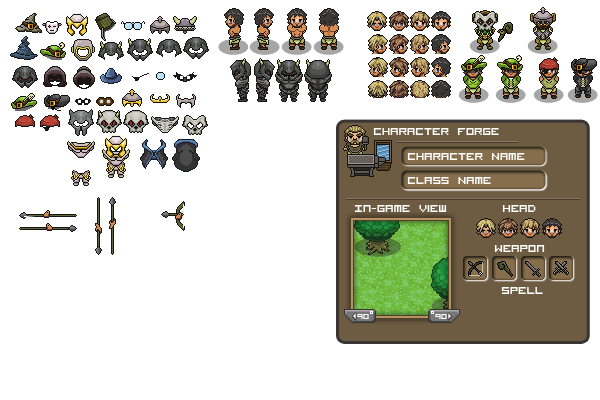
<style>
.page{position:relative;width:600px;height:400px;background:#ffffff}
.page>*{position:absolute;margin:0}
.t1{font:14px "VisitorTT1BRK";color:#ffffff}
.t2{font:10px "VisitorTT1BRK";color:#ffffff}
</style>
<div class="page">
<p class="t1" style="left:373px;top:128px;width:126px;height:7px">Character Forge</p>
<p class="t1" style="left:407px;top:153px;width:118px;height:7px">Character Name</p>
<p class="t1" style="left:407px;top:177px;width:84px;height:7px">Class Name</p>
<p class="t1" style="left:354px;top:205px;width:93px;height:7px">In-Game View</p>
<p class="t1" style="left:502px;top:205px;width:34px;height:7px">Head</p>
<p class="t1" style="left:494px;top:245px;width:51px;height:7px">Weapon</p>
<p class="t1" style="left:501px;top:287px;width:42px;height:7px">Spell</p>
<p class="t2" style="left:357px;top:314px;width:12px;height:5px">90</p>
<p class="t2" style="left:435px;top:314px;width:12px;height:5px">90</p>
</div>
